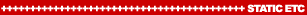
<style>
.page{position:relative;width:307px;height:15px;background:#cc0000}
.page>*{position:absolute;margin:0}
.t1{font:10px "Arial-Black";letter-spacing:-0.08em;color:#ffffff}
</style>
<div class="page">
<p class="t1" style="left:1px;top:4px;width:304px;height:9px">++++++++++++++++++++++++++++++++++++++++++  STATIC ETC</p>
</div>
